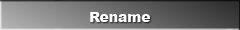
<style>
.page{position:relative;width:240px;height:30px}
.page>*{position:absolute;margin:0}
.t1{font:13.9px "Arial-Black";color:#ffffff}
</style>
<div class="page">
<p class="t1" style="left:90px;top:12px;width:61px;height:10px">Rename</p>
</div>
